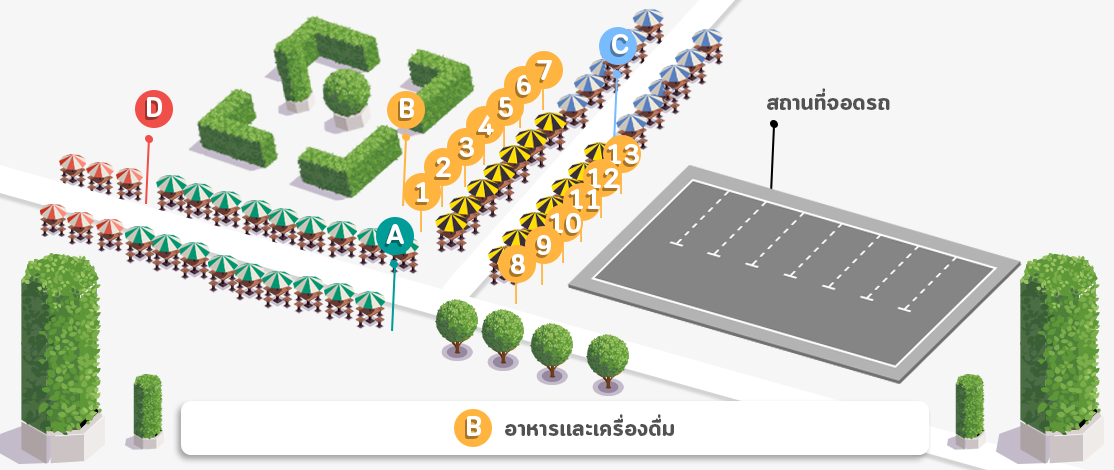
<style>
.page{position:relative;width:1114px;height:470px;background:#f6f6f6}
.page>*{position:absolute;margin:0}
.t1{font:27.5px "CloudSoft-Bold";color:#ffffff}
.t2{font:24px "CloudSoft-Bold";color:#525252}
</style>
<div class="page">
<p class="t1" style="left:612px;top:34px;width:17px;height:20px">C</p>
<p class="t1" style="left:537px;top:60px;width:15px;height:20px">7</p>
<p class="t1" style="left:517px;top:75px;width:14px;height:20px">6</p>
<p class="t2" style="left:767px;top:88px;width:123px;height:22px">สถานที่จอดรถ</p>
<p class="t1" style="left:147px;top:97px;width:15px;height:20px">D</p>
<p class="t1" style="left:400px;top:98px;width:14px;height:20px">B</p>
<p class="t1" style="left:499px;top:97px;width:14px;height:20px">5</p>
<p class="t1" style="left:478px;top:115px;width:16px;height:20px">4</p>
<p class="t1" style="left:459px;top:137px;width:15px;height:20px">3</p>
<p class="t1" style="left:608px;top:144px;width:31px;height:20px">13</p>
<p class="t1" style="left:436px;top:157px;width:15px;height:20px">2</p>
<p class="t1" style="left:588px;top:168px;width:31px;height:20px">12</p>
<p class="t1" style="left:416px;top:182px;width:13px;height:20px">1</p>
<p class="t1" style="left:570px;top:189px;width:30px;height:20px">11</p>
<p class="t1" style="left:550px;top:213px;width:31px;height:20px">10</p>
<p class="t1" style="left:386px;top:224px;width:18px;height:20px">A</p>
<p class="t1" style="left:537px;top:235px;width:14px;height:20px">9</p>
<p class="t1" style="left:511px;top:254px;width:14px;height:20px">8</p>
<p class="t2" style="left:505px;top:414px;width:169px;height:22px">อาหารเเละเครื่องดื่ม</p>
<p class="t1" style="left:467px;top:416px;width:14px;height:20px">B</p>
</div>
